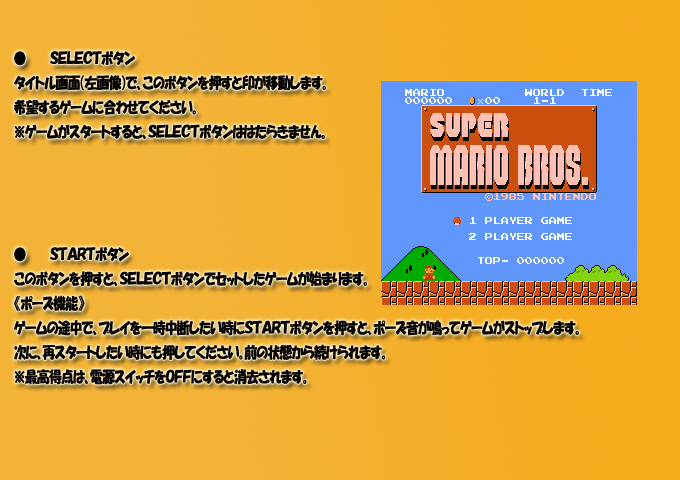
<style>
.page{position:relative;width:680px;height:480px}
.page>*{position:absolute;margin:0}
.t1{font:15.4px "HGPSoeiKakupoptai";letter-spacing:-0.015em;color:#000000;scale:0.82 1}
</style>
<div class="page">
<p class="t1" style="left:14px;top:51px;width:565px;height:334px">● ＳＥＬＥＣＴボタン<br>タイトル画面（左画像）で、このボタンを押すと印が移動します。<br>希望するゲームに合わせてください。<br>※ゲームがスタートすると、ＳＥＬＥＣＴボタンははたらきません。<br><br><br><br><br>● ＳＴＡＲＴボタン<br>このボタンを押すと、ＳＥＬＥＣＴボタンでセットしたゲームが始まります。<br>《ポーズ機能》<br>ゲームの途中で、プレイを一時中断したい時にＳＴＡＲＴボタンを押すと、ポーズ音が鳴ってゲームがストップします。<br>次に、再スタートしたい時にも押してください。前の状態から続けられます。<br>※最高得点は、電源スイッチをＯＦＦにすると消去されます。</p>
</div>
